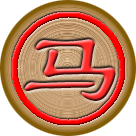
<style>
.page{position:relative;width:136px;height:136px}
.page>*{position:absolute;margin:0}
.t1{font:100px "LiSu"}
</style>
<div class="page">
<p class="t1" style="left:24px;top:39px;width:92px;height:62px">马</p>
</div>
